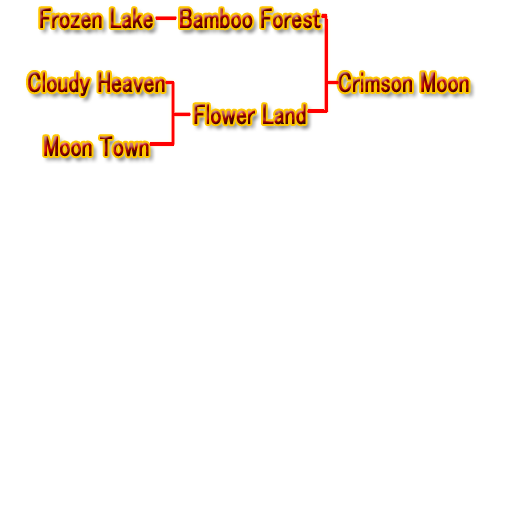
<style>
.page{position:relative;width:512px;height:512px;background:#ffffff}
.page>*{position:absolute;margin:0}
.t1{font:28.8px "MS-UIGothic";font-weight:bold;scale:0.75 1}
</style>
<div class="page">
<p class="t1" style="left:40px;top:8px;width:113px;height:21px">Frozen Lake</p>
<p class="t1" style="left:180px;top:8px;width:141px;height:21px">Bamboo Forest</p>
<p class="t1" style="left:28px;top:72px;width:137px;height:24px">Cloudy Heaven</p>
<p class="t1" style="left:338px;top:72px;width:131px;height:21px">Crimson Moon</p>
<p class="t1" style="left:194px;top:104px;width:112px;height:21px">Flower Land</p>
<p class="t1" style="left:44px;top:136px;width:105px;height:21px">Moon Town</p>
</div>
